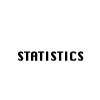
<style>
.page{position:relative;width:100px;height:100px;background:#ffffff}
.page>*{position:absolute;margin:0}
.t1{font:12px "Krungthep";color:#000000}
</style>
<div class="page">
<p class="t1" style="left:18px;top:51px;width:66px;height:10px">STATISTICS</p>
</div>
